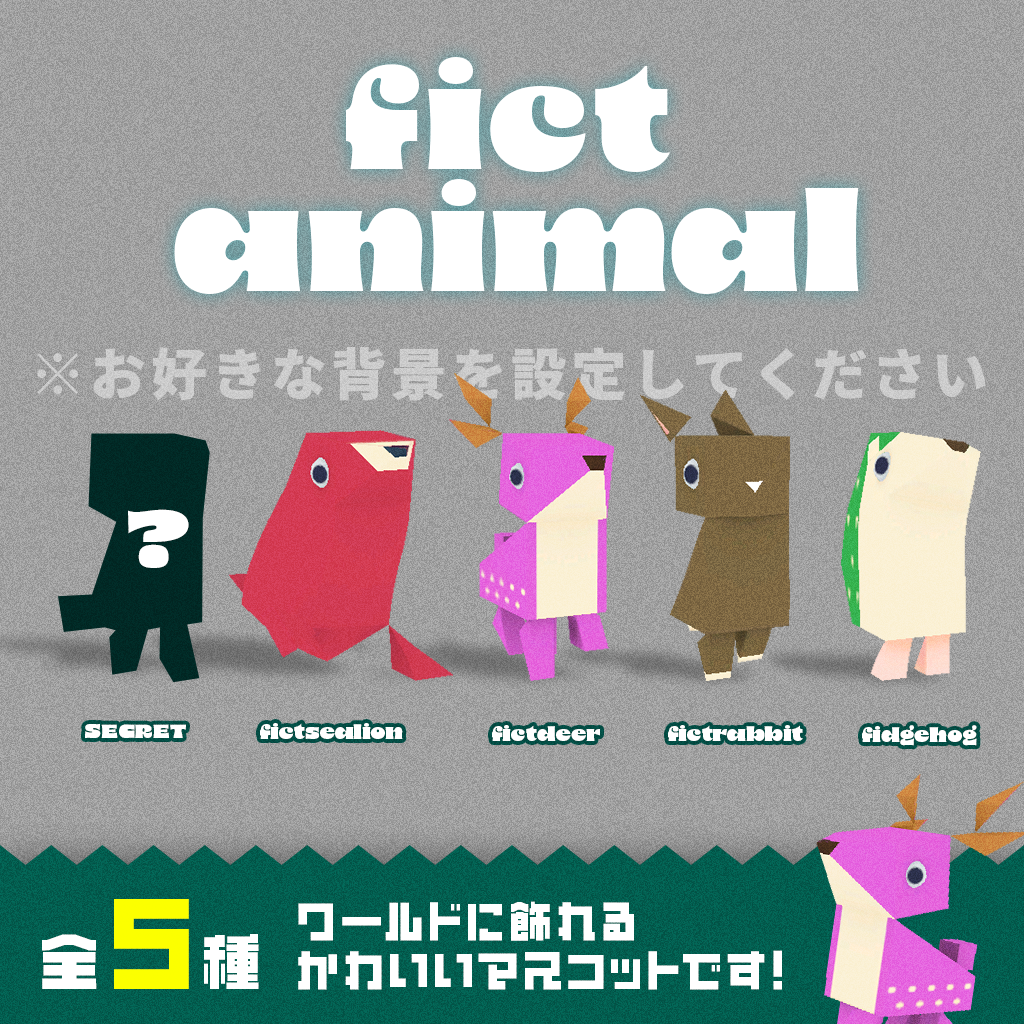
<style>
.page{position:relative;width:1024px;height:1024px}
.page>*{position:absolute;margin:0}
.t1{font:153.8px "8-Heavy";color:#ffffff}
.t2{font:55.7px "NotoSansCJKjp-Black";letter-spacing:0.08em;color:#cbcbcb}
.t3{font:90.6px "8-Heavy";color:#ffffff}
.t4{font:22px "8-Heavy";color:#ffffff}
.t5{font:66px "ABDON-Bold";color:#ffffff}
.t6{font:110px "ABDON-Bold";color:#fcff00}
.t7{font:47.1px/49.4px "ABDON-Bold";letter-spacing:0.02em;color:#ffffff}
</style>
<div class="page">
<p class="t1" style="left:346px;top:57px;width:324px;height:115px">fict</p>
<p class="t1" style="left:174px;top:179px;width:685px;height:115px">animal</p>
<p class="t2" style="left:37px;top:347px;width:949px;height:54px">※お好きな背景を設定してください</p>
<p class="t3" style="left:128px;top:509px;width:61px;height:59px">?</p>
<p class="t4" style="left:85px;top:724px;width:101px;height:14px">SECRET</p>
<p class="t4" style="left:260px;top:723px;width:143px;height:16px">fictsealion</p>
<p class="t4" style="left:492px;top:725px;width:108px;height:16px">fictdeer</p>
<p class="t4" style="left:668px;top:725px;width:135px;height:16px">fictrabbit</p>
<p class="t4" style="left:862px;top:725px;width:115px;height:21px">fidgehog</p>
<p class="t5" style="left:42px;top:899px;width:217px;height:90px">全<span class="t6">5</span>種</p>
<p class="t7" style="left:298px;top:901px;width:484px;height:89px">ワールドに飾れる<br>かわいいマスコットです！</p>
</div>
